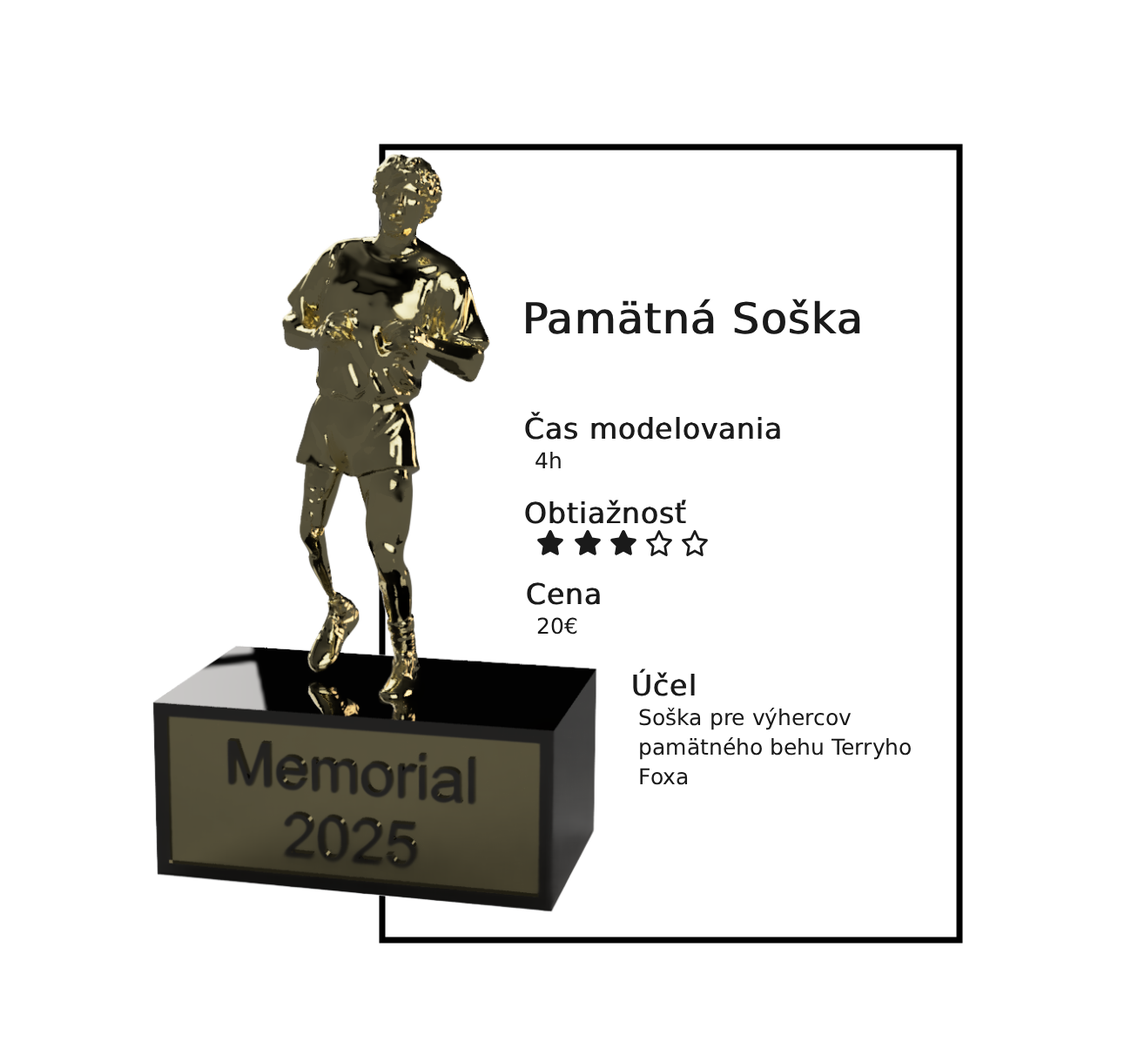
<style>
.page{position:relative;width:1138px;height:1048px;background:#ffffff}
.page>*{position:absolute;margin:0}
.t1{font:42.7px "DejaVuSans";color:#1a1a1a;font-weight:bold}
.t2{font:28.7px/29.6px "DejaVuSans";color:#1a1a1a;font-weight:bold}
.t3{font:21.8px/29.6px "DejaVuSans";color:#1a1a1a}
.t4{font:28.7px "DejaVuSans";color:#1a1a1a;font-weight:bold}
</style>
<div class="page">
<p class="t1" style="left:526px;top:299px;width:334px;height:35px">Pamätná Soška</p>
<p class="t2" style="left:525px;top:412px;width:255px;height:56px">Čas modelovania<br> <span class="t3">4h</span></p>
<p class="t4" style="left:525px;top:500px;width:161px;height:24px">Obtiažnosť</p>
<p class="t2" style="left:527px;top:582px;width:73px;height:53px">Cena<br> <span class="t3">20€</span></p>
<p class="t3" style="left:633px;top:669px;width:278px;height:116px"><span class="t2">Účel<br> </span>Soška pre výhercov<br> pamätného behu Terryho <br> Foxa</p>
</div>
